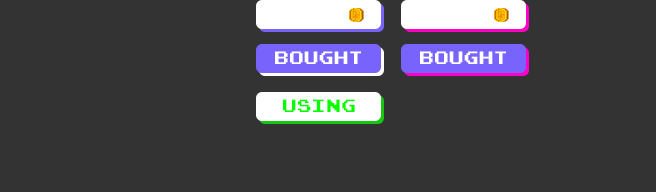
<style>
.page{position:relative;width:656px;height:192px;background:#333333}
.page>*{position:absolute;margin:0}
.t1{font:18px "JoystixMonospace-Regular";color:#ffffff}
.t2{font:18px "JoystixMonospace-Regular";color:#06ff00}
</style>
<div class="page">
<p class="t1" style="left:275px;top:51px;width:86px;height:13px">BOUGHT</p>
<p class="t1" style="left:420px;top:51px;width:86px;height:13px">BOUGHT</p>
<p class="t2" style="left:283px;top:99px;width:72px;height:13px">Using</p>
</div>
